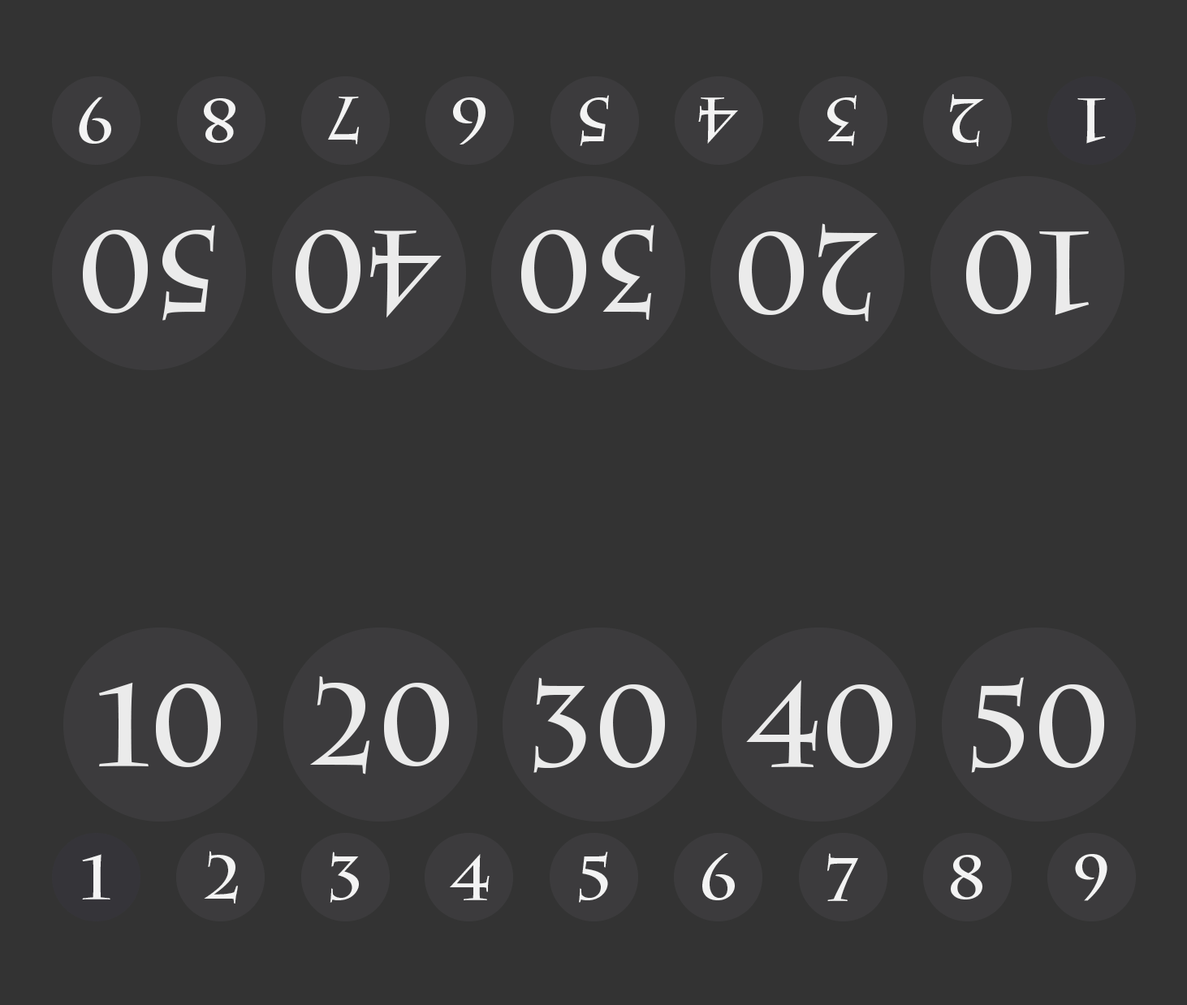
<style>
.page{position:relative;width:1187px;height:1005px;background:#333333}
.page>*{position:absolute;margin:0}
.t1{font:61.7px "CharlemagneStd-Bold";color:#f3f3f3}
.t2{font:61.7px "CharlemagneStd-Bold";color:#f3f3f3;scale:1.03 1}
.t3{font:61.7px "CharlemagneStd-Bold";color:#f3f3f3;scale:1.05 1}
.t4{font:61.7px "CharlemagneStd-Bold";color:#f3f3f3;scale:1.04 1}
.t5{font:114.5px "CharlemagneStd-Bold";color:#f3f3f3}
</style>
<div class="page">
<p class="t1" style="left:79px;top:97px;width:32px;height:47px;rotate:180deg">9</p>
<p class="t1" style="left:204px;top:98px;width:31px;height:45px;rotate:180deg">8</p>
<p class="t1" style="left:328px;top:97px;width:31px;height:47px;rotate:180deg">7</p>
<p class="t2" style="left:453px;top:97px;width:32px;height:47px;rotate:180deg">6</p>
<p class="t1" style="left:580px;top:95px;width:29px;height:51px;rotate:180deg">5</p>
<p class="t1" style="left:698px;top:97px;width:40px;height:47px;rotate:180deg">4</p>
<p class="t2" style="left:827px;top:95px;width:29px;height:51px;rotate:180deg">3</p>
<p class="t3" style="left:950px;top:94px;width:34px;height:53px;rotate:180deg">2</p>
<p class="t4" style="left:1077px;top:98px;width:29px;height:46px;rotate:180deg">1</p>
<p class="t5" style="left:83px;top:225px;width:132px;height:96px;rotate:180deg;opacity:0.95">50</p>
<p class="t5" style="left:295px;top:230px;width:147px;height:88px;rotate:180deg;opacity:0.95">40</p>
<p class="t5" style="left:521px;top:225px;width:133px;height:96px;rotate:180deg;opacity:0.95">30</p>
<p class="t5" style="left:739px;top:223px;width:138px;height:98px;rotate:180deg;opacity:0.95">20</p>
<p class="t5" style="left:966px;top:231px;width:123px;height:84px;rotate:180deg;opacity:0.95">10</p>
<p class="t5" style="left:310px;top:676px;width:139px;height:98px;opacity:0.95">20</p>
<p class="t5" style="left:533px;top:677px;width:132px;height:96px;opacity:0.95">30</p>
<p class="t5" style="left:971px;top:677px;width:133px;height:96px;opacity:0.95">50</p>
<p class="t5" style="left:98px;top:683px;width:123px;height:84px;opacity:0.95">10</p>
<p class="t5" style="left:746px;top:679px;width:146px;height:89px;opacity:0.95">40</p>
<p class="t4" style="left:82px;top:854px;width:28px;height:45px">1</p>
<p class="t3" style="left:204px;top:851px;width:34px;height:52px">2</p>
<p class="t2" style="left:330px;top:851px;width:29px;height:52px">3</p>
<p class="t1" style="left:450px;top:854px;width:39px;height:46px">4</p>
<p class="t1" style="left:579px;top:851px;width:29px;height:52px">5</p>
<p class="t2" style="left:702px;top:853px;width:33px;height:47px">6</p>
<p class="t1" style="left:827px;top:853px;width:31px;height:48px">7</p>
<p class="t1" style="left:950px;top:855px;width:32px;height:44px">8</p>
<p class="t1" style="left:1075px;top:854px;width:32px;height:47px">9</p>
</div>
